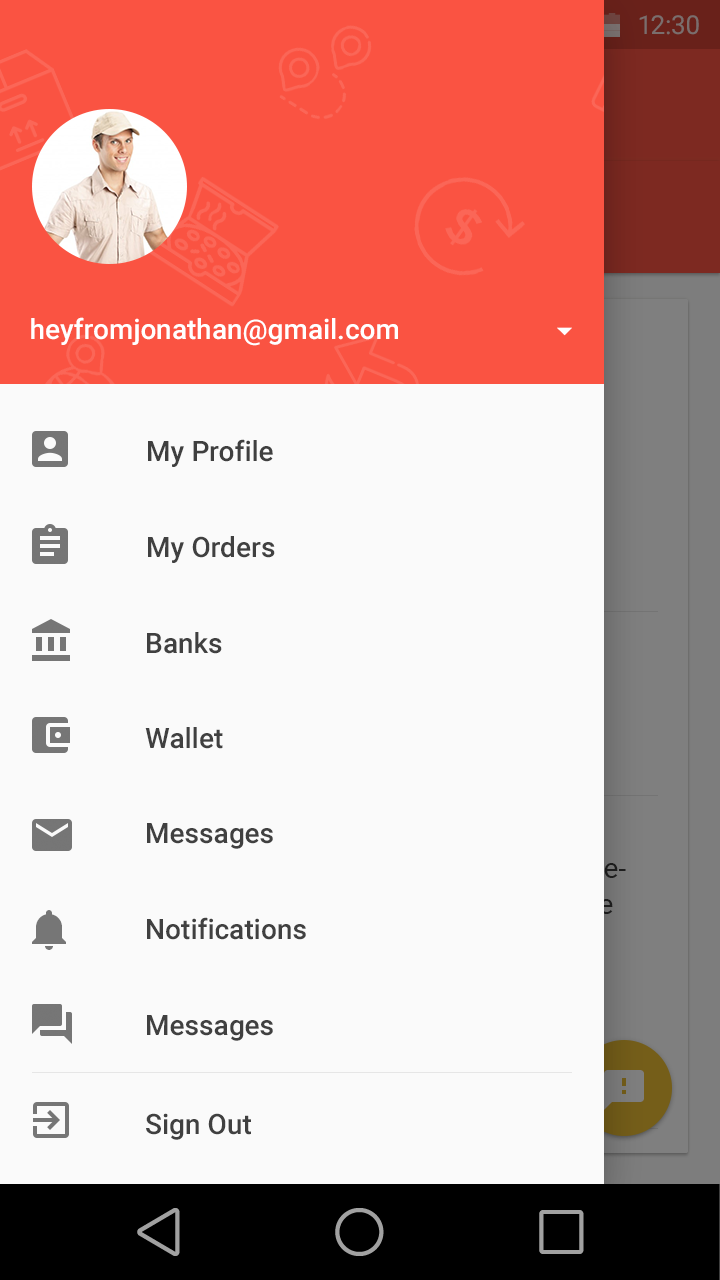
<style>
.page{position:relative;width:720px;height:1280px;background:#fafafa}
.page>*{position:absolute;margin:0}
.t1{font:28px "Roboto-Medium";color:#ffffff}
.t2{font:28px "Roboto-Medium";color:#3f3f3f}
.t3{font:28px "Roboto-Medium";color:#404040}
</style>
<div class="page">
<p class="t1" style="left:31px;top:317px;width:367px;height:29px">heyfromjonathan@gmail.com</p>
<p class="t2" style="left:148px;top:439px;width:125px;height:28px">My Profile</p>
<p class="t3" style="left:148px;top:536px;width:127px;height:27px">My Orders</p>
<p class="t3" style="left:147px;top:632px;width:75px;height:22px">Banks</p>
<p class="t3" style="left:145px;top:727px;width:78px;height:22px">Wallet</p>
<p class="t3" style="left:147px;top:823px;width:126px;height:26px">Messages</p>
<p class="t3" style="left:147px;top:917px;width:159px;height:23px">Notifications</p>
<p class="t3" style="left:147px;top:1015px;width:126px;height:26px">Messages</p>
<p class="t3" style="left:146px;top:1113px;width:105px;height:27px">Sign Out</p>
</div>
